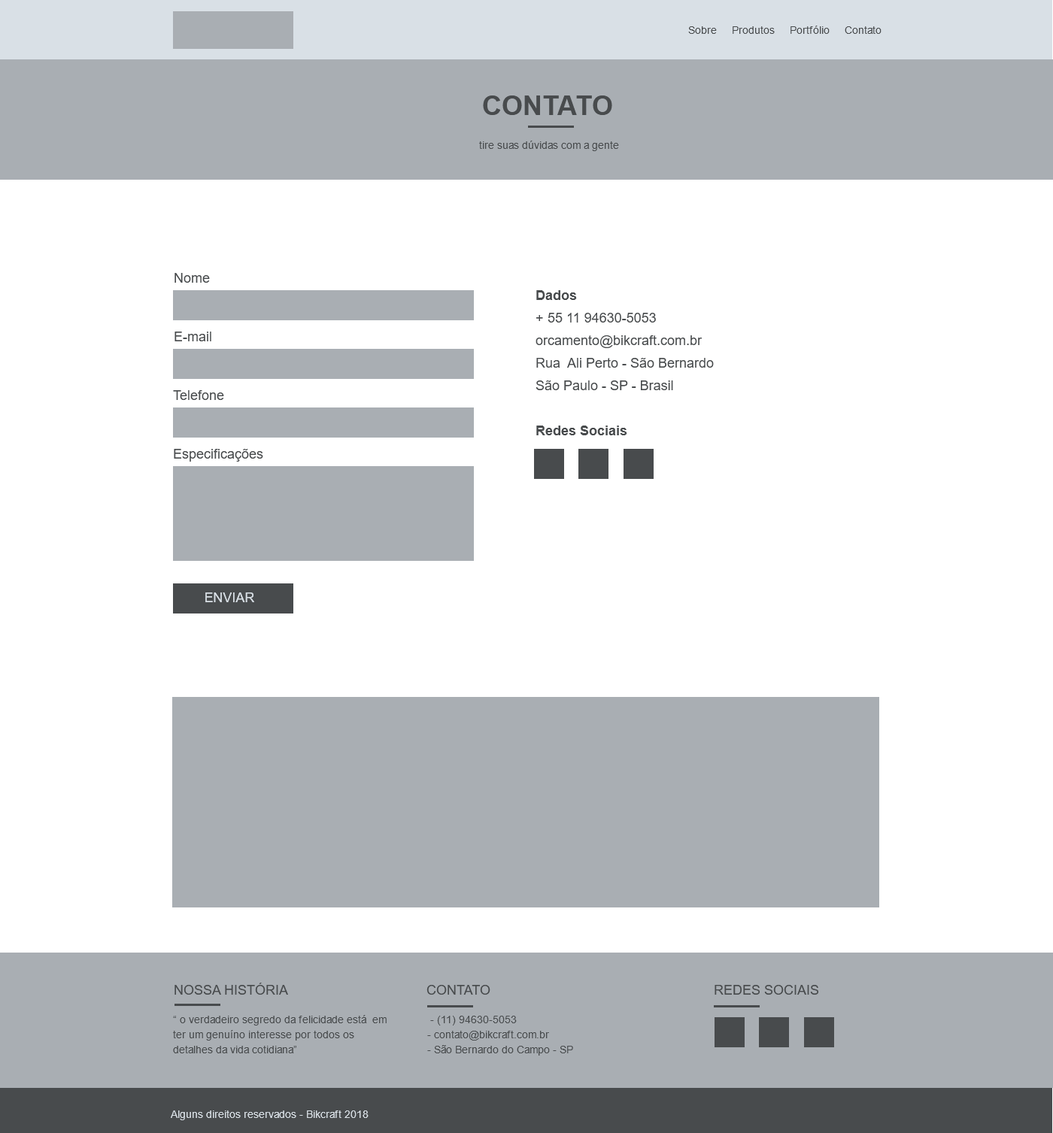
<style>
.page{position:relative;width:1053px;height:1133px;background:#ffffff}
.page>*{position:absolute;margin:0}
.t1{font:10.5px "ArialMT";color:#484b4d}
.t2{font:27.1px "Arial-BoldMT";color:#484b4d;text-transform:uppercase}
.t3{font:13.5px "ArialMT";color:#484b4d}
.t4{font:13.5px/22.6px "ArialMT";color:#484b4d}
.t5{font:13.5px/22.6px "Arial-BoldMT";color:#484b4d}
.t6{font:13.5px "ArialMT";color:#d9e0e6}
.t7{font:13.5px "ArialMT";color:#484b4d;text-transform:uppercase}
.t8{font:10.5px/15px "ArialMT";color:#484b4d}
.t9{font:10.5px "ArialMT";color:#d9e0e6}
.t10{font:10.5px "ArialMT";color:#d9e0e6;text-transform:uppercase}
</style>
<div class="page">
<p class="t1" style="left:688px;top:26px;width:193px;height:8px">Sobre     Produtos     Portfólio     Contato</p>
<p class="t2" style="left:483px;top:95px;width:129px;height:20px">contato</p>
<p class="t1" style="left:479px;top:141px;width:140px;height:10px">tire suas dúvidas com a gente</p>
<p class="t3" style="left:174px;top:273px;width:36px;height:10px">Nome</p>
<p class="t4" style="left:535px;top:290px;width:178px;height:145px"><span class="t5">Dados<br></span>+ 55 11 94630-5053<br>orcamento@bikcraft.com.br<br>Rua  Ali Perto - São Bernardo <br>São Paulo - SP - Brasil<br><br><span class="t5">Redes Sociais</span></p>
<p class="t3" style="left:174px;top:332px;width:37px;height:9px">E-mail</p>
<p class="t3" style="left:173px;top:390px;width:51px;height:10px">Telefone</p>
<p class="t3" style="left:174px;top:449px;width:89px;height:13px">Especificações</p>
<p class="t6" style="left:205px;top:592px;width:49px;height:10px">ENVIAR</p>
<p class="t7" style="left:174px;top:983px;width:114px;height:12px">Nossa história</p>
<p class="t7" style="left:426px;top:985px;width:64px;height:10px">Contato</p>
<p class="t7" style="left:714px;top:985px;width:104px;height:10px">redes sociais</p>
<p class="t8" style="left:173px;top:1015px;width:213px;height:38px">“ o verdadeiro segredo da felicidade está  em <br>ter um genuíno interesse por todos os <br>detalhes da vida cotidiana”</p>
<p class="t8" style="left:427px;top:1016px;width:146px;height:40px">- (11) 94630-5053<br>- contato@bikcraft.com.br<br>- São Bernardo do Campo - SP</p>
<p class="t9" style="left:171px;top:1110px;width:197px;height:10px"><span class="t10">A</span>lguns direitos reservados - Bikcraft 2018</p>
</div>
